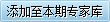
<style>
.page{position:relative;width:110px;height:22px}
.page>*{position:absolute;margin:0}
.t1{font:12px "SimSun";color:#090909}
.t2{font:12px "SimSun";color:#ffffff}
</style>
<div class="page">
<p class="t1" style="left:7px;top:5px;width:95px;height:12px">添加至本期专家库</p>
<p class="t2" style="left:8px;top:6px;width:95px;height:12px">添加至本期专家库</p>
</div>
